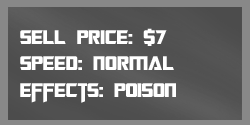
<style>
.page{position:relative;width:250px;height:125px}
.page>*{position:absolute;margin:0}
.t1{font:22px "TransformersMovie";color:#ffffff}
.t2{font:22px "TransformersMovie";letter-spacing:0.02em;color:#ffffff}
</style>
<div class="page">
<p class="t1" style="left:20px;top:28px;width:156px;height:75px">sell p<span class="t2">ri</span>ce: $7<br>spee<span class="t2">d</span>: <span class="t2">nor</span>m<span class="t2">al<br></span>effects: poison</p>
</div>
